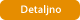
<style>
.page{position:relative;width:80px;height:20px;background:#e68d00}
.page>*{position:absolute;margin:0}
.t1{font:11px "MyriadPro-Semibold";color:#ffffff}
</style>
<div class="page">
<p class="t1" style="left:21px;top:5px;width:40px;height:11px">Detaljno</p>
</div>
